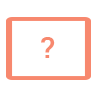
<style>
.page{position:relative;width:96px;height:96px;background:#ffffff}
.page>*{position:absolute;margin:0}
.t1{font:30px "Roboto-Medium";color:#f7886e}
</style>
<div class="page">
<p class="t1" style="left:41px;top:37px;width:14px;height:21px">?</p>
</div>
